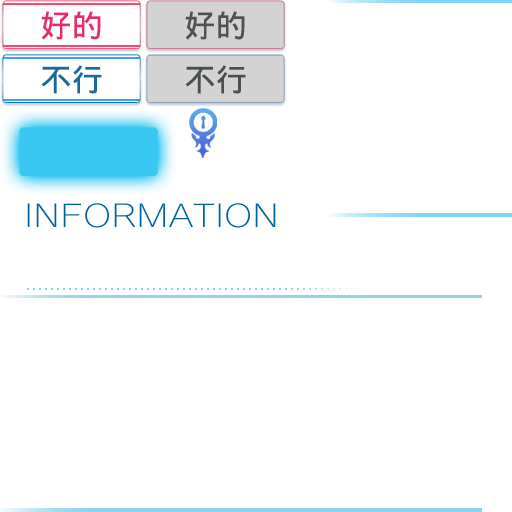
<style>
.page{position:relative;width:512px;height:512px;background:#ffffff}
.page>*{position:absolute;margin:0}
.t1{font:30.7px "WenQuanYiMicroHeiMono";color:#e72c6b;font-weight:bold}
.t2{font:30.7px "WenQuanYiMicroHeiMono";color:#525152;font-weight:bold}
.t3{font:30.7px "WenQuanYiMicroHeiMono";color:#18699c;font-weight:bold}
.t4{font:30.7px "WenQuanYiMicroHeiMono";color:#4a514a;font-weight:bold}
</style>
<div class="page">
<p class="t1" style="left:41px;top:11px;width:60px;height:29px">好的</p>
<p class="t2" style="left:185px;top:11px;width:60px;height:29px">好的</p>
<p class="t3" style="left:41px;top:65px;width:61px;height:29px">不行</p>
<p class="t4" style="left:185px;top:65px;width:61px;height:29px">不行</p>
</div>
